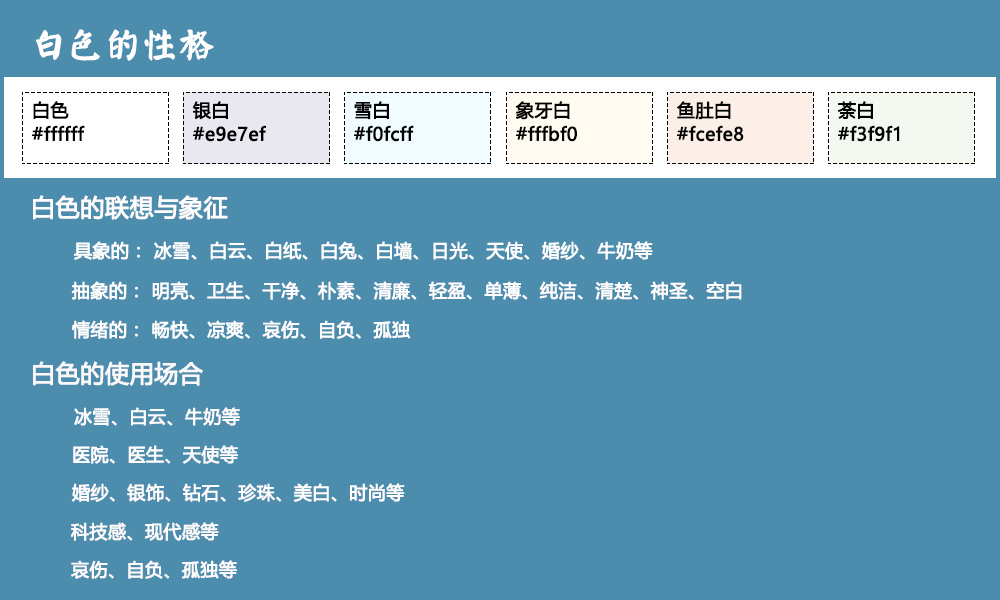
<style>
.page{position:relative;width:1000px;height:600px;background:#4c8dae}
.page>*{position:absolute;margin:0}
.t1{font:36px "øów·»îów©I";color:#fefeff;font-weight:bold}
.t2{font:18px/24px "MicrosoftYaHei";color:#020000;font-weight:bold}
.t3{font:18px/24px "MicrosoftYaHei";color:#000000;font-weight:bold}
.t4{font:18px/24px "MicrosoftYaHei";color:#010101;font-weight:bold}
.t5{font:18px/24px "MicrosoftYaHei";color:#020202;font-weight:bold}
.t6{font:18px/24px "MicrosoftYaHei";color:#040404;font-weight:bold}
.t7{font:24px "MicrosoftYaHei";color:#fdfbfb;font-weight:bold}
.t8{font:18px "MicrosoftYaHei";color:#fffefe;font-weight:bold}
.t9{font:18px "MicrosoftYaHei";color:#fffdfd;font-weight:bold}
.t10{font:18px "MicrosoftYaHei";color:#fefefe;font-weight:bold}
.t11{font:24px "MicrosoftYaHei";color:#faf8f8;font-weight:bold}
.t12{font:18px "MicrosoftYaHei";color:#fdfcfc;font-weight:bold}
.t13{font:18px "MicrosoftYaHei";color:#fefdfd;font-weight:bold}
.t14{font:18px "MicrosoftYaHei";color:#fdfbfb;font-weight:bold}
</style>
<div class="page">
<p class="t1" style="left:36px;top:29px;width:178px;height:32px">白色的性格</p>
<p class="t2" style="left:32px;top:101px;width:53px;height:40px">白色<br>#ffffff</p>
<p class="t3" style="left:192px;top:101px;width:74px;height:41px">银白<br>#e9e7ef</p>
<p class="t4" style="left:354px;top:101px;width:60px;height:41px">雪白<br>#f0fcff</p>
<p class="t5" style="left:516px;top:101px;width:61px;height:41px">象牙白<br>#fffbf0</p>
<p class="t6" style="left:677px;top:101px;width:67px;height:41px">鱼肚白<br>#fcefe8</p>
<p class="t3" style="left:837px;top:101px;width:63px;height:41px">荼白<br>#f3f9f1</p>
<p class="t7" style="left:33px;top:195px;width:195px;height:25px">白色的联想与象征</p>
<p class="t8" style="left:74px;top:241px;width:579px;height:19px">具象的： 冰雪、白云、白纸、白兔、白墙、日光、天使、婚纱、牛奶等</p>
<p class="t9" style="left:71px;top:281px;width:671px;height:19px">抽象的： 明亮、卫生、干净、朴素、清廉、轻盈、单薄、纯洁、清楚、神圣、空白</p>
<p class="t10" style="left:72px;top:320px;width:339px;height:19px">情绪的： 畅快、凉爽、哀伤、自负、孤独</p>
<p class="t11" style="left:33px;top:361px;width:170px;height:25px">白色的使用场合</p>
<p class="t12" style="left:74px;top:407px;width:166px;height:19px">冰雪、白云、牛奶等</p>
<p class="t13" style="left:73px;top:445px;width:165px;height:19px">医院、医生、天使等</p>
<p class="t9" style="left:71px;top:483px;width:334px;height:19px">婚纱、银饰、钻石、珍珠、美白、时尚等</p>
<p class="t14" style="left:70px;top:522px;width:149px;height:19px">科技感、现代感等</p>
<p class="t14" style="left:71px;top:560px;width:166px;height:19px">哀伤、自负、孤独等</p>
</div>
